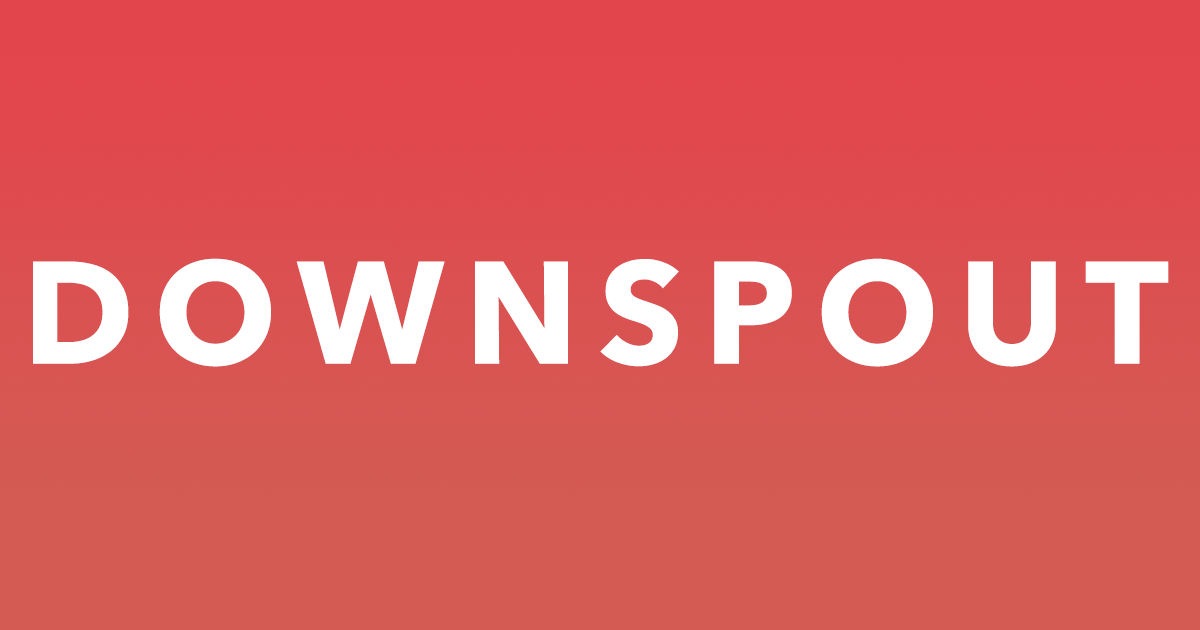
<style>
.page{position:relative;width:1200px;height:630px;background:#d45a54}
.page>*{position:absolute;margin:0}
.t1{font:144px "AvenirNext-Bold";letter-spacing:0.14em;color:#ffffff}
</style>
<div class="page">
<p class="t1" style="left:33px;top:258px;width:1136px;height:109px">DOWNSPOUT</p>
</div>
